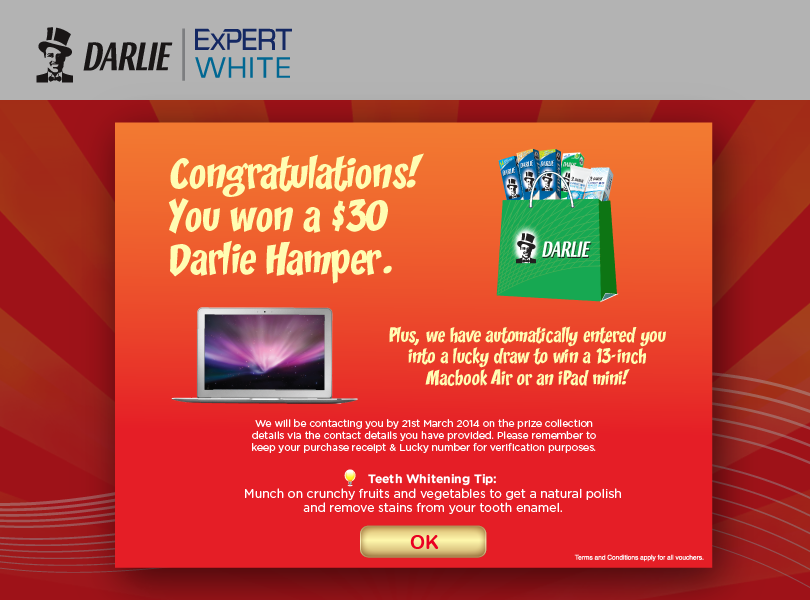
<style>
.page{position:relative;width:810px;height:600px}
.page>*{position:absolute;margin:0}
.t1{font:39px/43px "CCZoinks";color:#fffdb3}
.t2{font:18px "CCZoinks";color:#fffdb3}
.t3{font:10px "Gotham-Book";color:#ffffff}
.t4{font:12.2px "Gotham-Book";color:#ffffff}
.t5{font:12.2px "Gotham-Bold";color:#ffffff}
.t6{font:19px "ArialRoundedMTBold";color:#ea0022}
</style>
<div class="page">
<p class="t1" style="left:168px;top:153px;width:256px;height:131px">Congratulations!<br>You won a $30<br>Darlie Hamper.</p>
<p class="t2" style="left:389px;top:326px;width:277px;height:60px;text-align:center">Plus, we have automatically entered you into a lucky draw to win a 13-inch Macbook Air or an iPad mini!</p>
<p class="t3" style="left:252px;top:419px;width:344px;height:34px;text-align:center">We will be contacting you by 21st March 2014 on the prize collection details via the contact details you have provided. Please remember to keep your purchase receipt &amp; Lucky number for verification purposes.</p>
<p class="t4" style="left:245px;top:474px;width:376px;height:40px;text-align:center"><span class="t5">Teeth Whitening Tip:<br></span>Munch on crunchy fruits and vegetables to get a natural polish and remove stains from your tooth enamel.</p>
<p class="t6" style="left:410px;top:535px;width:29px;height:14px">OK</p>
</div>
